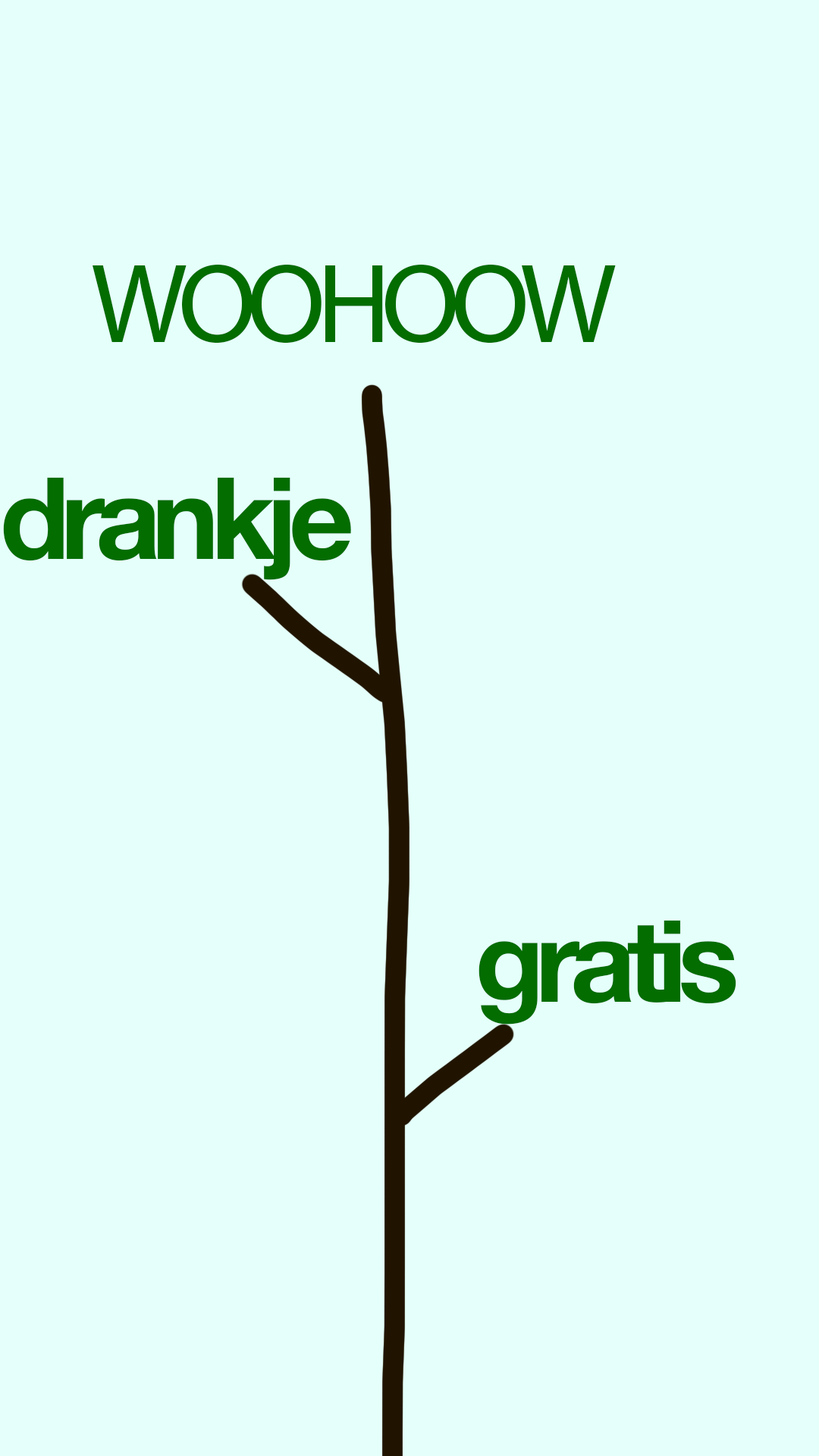
<style>
.page{position:relative;width:819px;height:1456px;background:#e5fffa}
.page>*{position:absolute;margin:0}
.t1{font:113.7px "MyriadPro-Regular";letter-spacing:-0.08em;color:#036d00}
.t2{font:113.7px "HelveticaNeueBold";letter-spacing:-0.08em;color:#036d00}
</style>
<div class="page">
<p class="t1" style="left:93px;top:264px;width:523px;height:80px">WOOHOOW</p>
<p class="t2" style="left:3px;top:477px;width:348px;height:103px">drankje</p>
<p class="t2" style="left:479px;top:920px;width:257px;height:104px">gratis</p>
</div>
